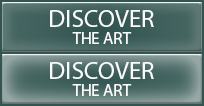
<style>
.page{position:relative;width:204px;height:106px}
.page>*{position:absolute;margin:0}
.t1{font:25px/16.7px "MyriadPro-Regular";color:#fbfbfb}
.t2{font:16.7px/16.7px "MyriadPro-Regular";color:#fbfbfb}
</style>
<div class="page">
<p class="t1" style="left:50px;top:10px;width:104px;height:34px;text-align:center">DISCOVER<br><span class="t2">THE ART</span></p>
<p class="t1" style="left:50px;top:62px;width:104px;height:34px;text-align:center">DISCOVER<br><span class="t2">THE ART</span></p>
</div>
